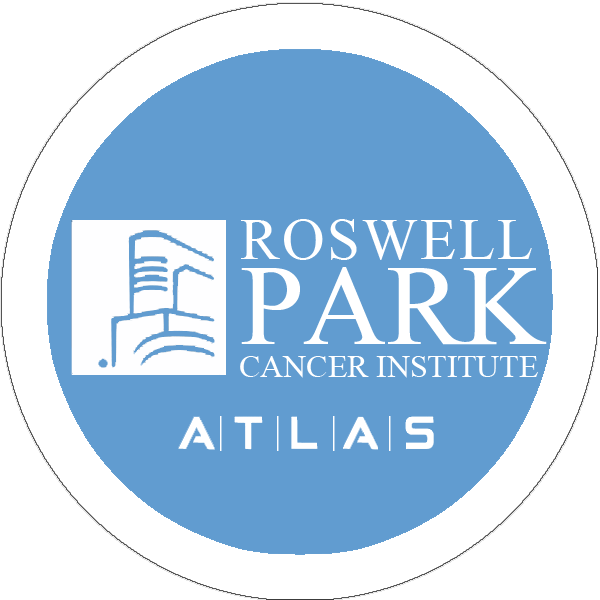
<style>
.page{position:relative;width:600px;height:600px;background:#ffffff}
.page>*{position:absolute;margin:0}
.t1{font:59.4px "TimesNewRomanPSMT";letter-spacing:0.035em;color:#ffffff}
.t2{font:115.2px "TimesNewRomanPSMT";letter-spacing:-0.005em;color:#ffffff}
.t3{font:32px "TimesNewRomanPSMT";letter-spacing:-0.005em;color:#ffffff}
.t4{font:37.5px "TimesNewRomanPSMT";letter-spacing:1.3em;color:#ffffff}
</style>
<div class="page">
<p class="t1" style="left:241px;top:219px;width:291px;height:41px">ROSWELL</p>
<p class="t2" style="left:241px;top:267px;width:306px;height:78px">PARK</p>
<p class="t3" style="left:240px;top:356px;width:298px;height:22px">CANCER INSTITUTE</p>
<p class="t4" style="left:220px;top:416px;width:171px;height:35px">||||</p>
</div>
